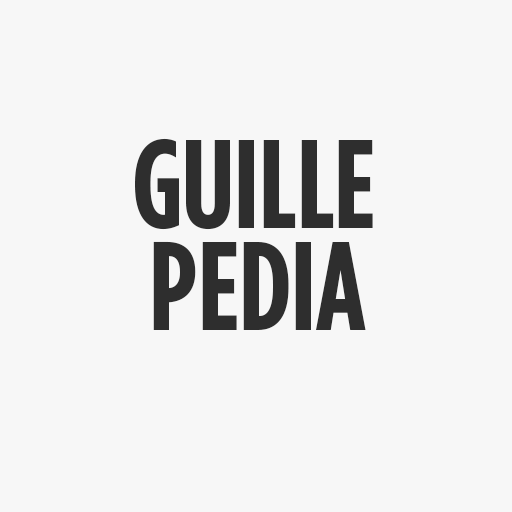
<style>
.page{position:relative;width:512px;height:512px;background:#f7f7f7}
.page>*{position:absolute;margin:0}
.t1{font:125px "GothamCondensed-Bold";color:#2e2e2e}
</style>
<div class="page">
<p class="t1" style="left:135px;top:138px;width:238px;height:92px">GUILLE</p>
<p class="t1" style="left:153px;top:241px;width:213px;height:89px">PEDIA</p>
</div>
